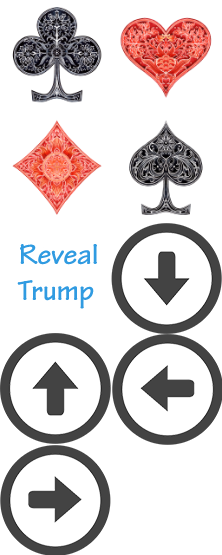
<style>
.page{position:relative;width:222px;height:555px;background:#ffffff}
.page>*{position:absolute;margin:0}
.t1{font:30px "TektonPro-Bold";color:#309be1}
.t2{font:30px "Perpetua-Bold";color:#309be1}
</style>
<div class="page">
<p class="t1" style="left:17px;top:244px;width:80px;height:65px"><span class="t2"> </span>Reveal<br> Trump</p>
</div>
